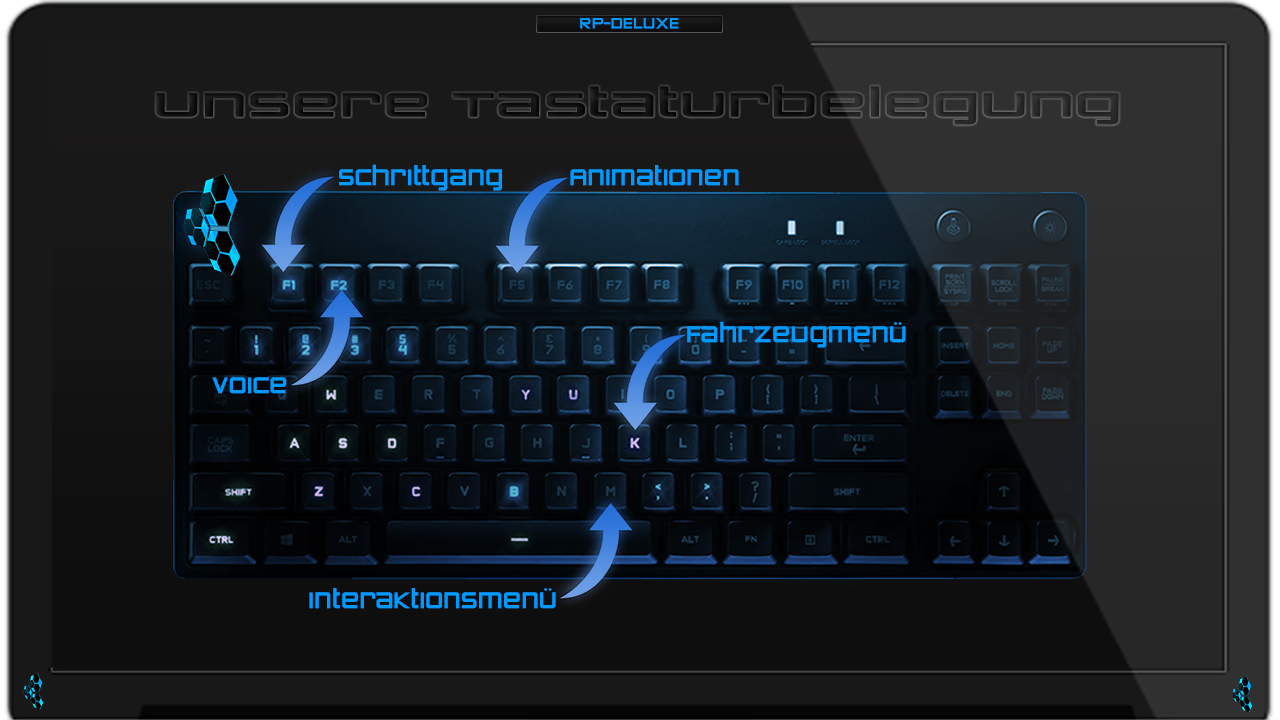
<style>
.page{position:relative;width:1280px;height:720px}
.page>*{position:absolute;margin:0}
.t1{font:18px "ZeroTwos";color:#0099ff}
.t2{font:40px "ZeroTwos";color:#171616;scale:1.75 1}
.t3{font:26.9px "ZeroTwos";color:#0099ff}
</style>
<div class="page">
<p class="t1" style="left:580px;top:18px;width:99px;height:11px">RP-DELUXE</p>
<p class="t2" style="left:156px;top:86px;width:963px;height:39px">unsere Tastaturbelegung</p>
<p class="t3" style="left:339px;top:164px;width:163px;height:27px">Schrittgang</p>
<p class="t3" style="left:570px;top:165px;width:169px;height:21px">Animationen</p>
<p class="t3" style="left:687px;top:321px;width:219px;height:27px">Fahrzeugmenü</p>
<p class="t3" style="left:212px;top:377px;width:75px;height:17px">Voice</p>
<p class="t3" style="left:309px;top:588px;width:247px;height:21px">Interaktionsmenü</p>
</div>
